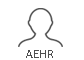
<style>
.page{position:relative;width:84px;height:60px;background:#ffffff}
.page>*{position:absolute;margin:0}
.t1{font:11px "Roboto-Thin";color:#4f4f4f}
</style>
<div class="page">
<p class="t1" style="left:26px;top:50px;width:27px;height:8px">AEHR</p>
</div>
